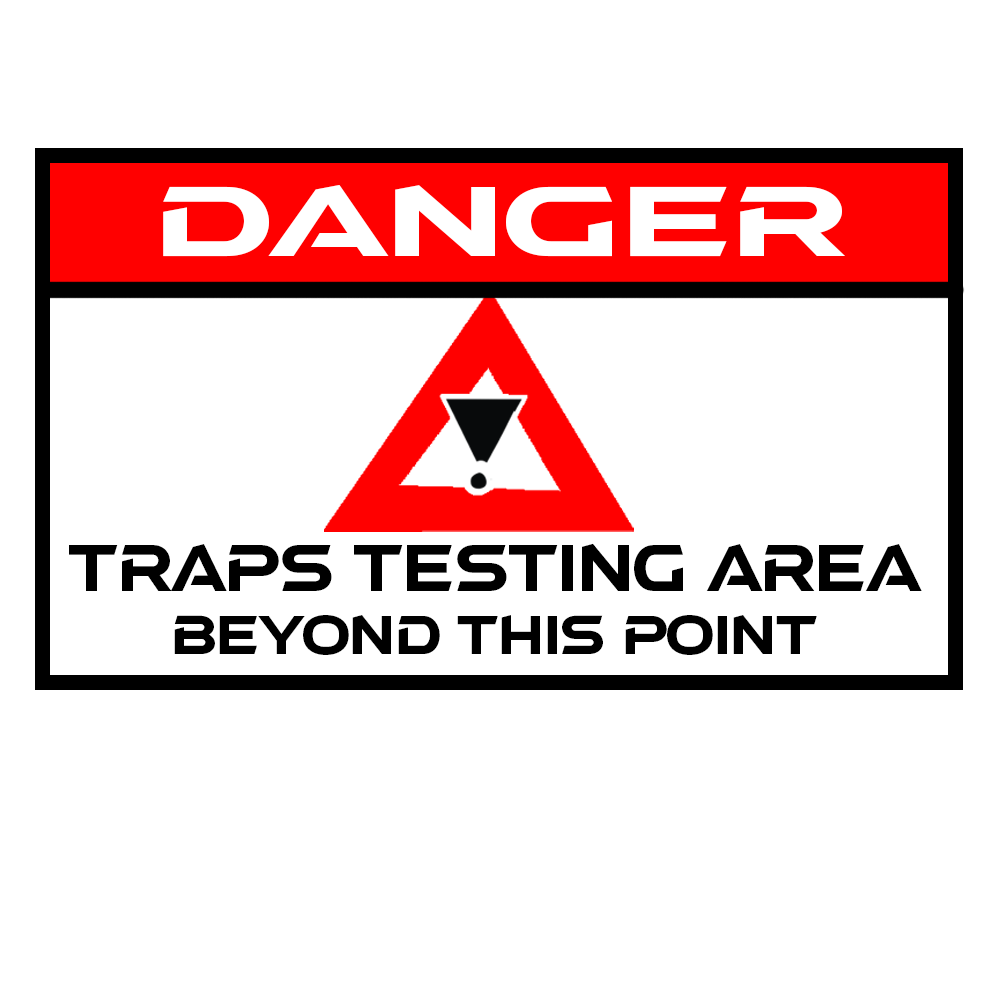
<style>
.page{position:relative;width:1000px;height:1000px;background:#ffffff}
.page>*{position:absolute;margin:0}
.t1{font:88.9px "aAtmospheric";color:#ffffff;scale:1.44 1}
.t2{font:59.7px "aAtmospheric";color:#000000}
.t3{font:49.4px "aAtmospheric";color:#000000}
</style>
<div class="page">
<p class="t1" style="left:163px;top:185px;width:682px;height:72px">Danger</p>
<p class="t2" style="left:69px;top:543px;width:853px;height:48px">Traps testing area</p>
<p class="t3" style="left:174px;top:615px;width:643px;height:40px">Beyond this point</p>
</div>
